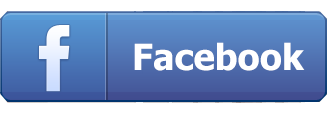
<style>
.page{position:relative;width:327px;height:118px;background:#ffffff}
.page>*{position:absolute;margin:0}
.t1{font:36px "Tahoma-Bold";color:#ffffff}
</style>
<div class="page">
<p class="t1" style="left:134px;top:42px;width:171px;height:29px">Facebook</p>
</div>
